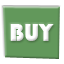
<style>
.page{position:relative;width:64px;height:64px;background:#62985b}
.page>*{position:absolute;margin:0}
.t1{font:26px "Bauhaus93";color:#ffffff}
</style>
<div class="page">
<p class="t1" style="left:10px;top:24px;width:44px;height:17px">BUY</p>
</div>
